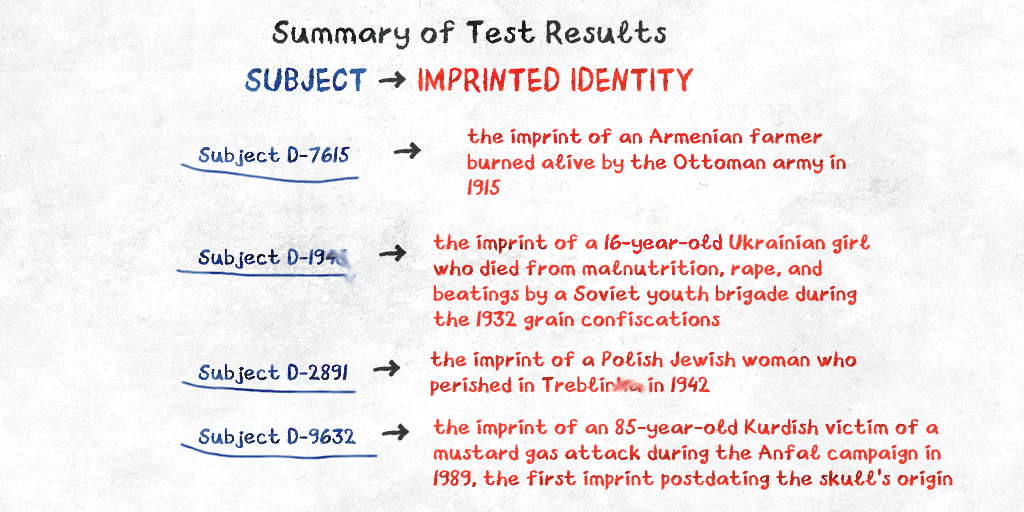
<style>
.page{position:relative;width:1024px;height:512px}
.page>*{position:absolute;margin:0}
.t1{font:32px/48px "CrayonLibre-Regular";letter-spacing:0.005em;font-weight:bold}
.t2{font:32px/48px "CrayonLibre-Regular";letter-spacing:0.005em;text-transform:uppercase;font-weight:bold}
.t3{font:21.3px "CrayonLibre-Regular";letter-spacing:0.005em;color:#ef2f26;font-weight:bold}
.t4{font:21.3px "CrayonLibre-Regular";letter-spacing:0.005em;font-weight:bold}
.t5{font:32px "CrayonLibre-Regular";letter-spacing:0.005em;text-transform:uppercase;font-weight:bold}
.t6{font:21.3px "CrayonLibre-Regular";letter-spacing:0.005em;color:#f23828;font-weight:bold}
</style>
<div class="page">
<p class="t1" style="left:245px;top:20px;width:448px;height:73px;text-align:center">Summary of Test Results<span class="t2"><br>Subject </span><span class="t2">→ </span><span class="t2">Imprinted Identity</span></p>
<p class="t3" style="left:467px;top:128px;width:379px;height:67px">the imprint of an Armenian farmer burned alive by the Ottoman army in 1915</p>
<p class="t4" style="left:198px;top:141px;width:224px;height:307px">Subject D-7615       <span class="t5">→<br>  <br><br> </span>Subject D-1945     <span class="t5">→  <br><br><br><br> </span>Subject D-2891    <span class="t5">→  <br><br> </span>Subject D-9632    <span class="t5">→</span></p>
<p class="t6" style="left:433px;top:233px;width:438px;height:98px">the imprint of a 16-year-old Ukrainian girl who died from malnutrition, rape, and beatings by a Soviet youth brigade during the 1932 grain confiscations</p>
<p class="t4" style="left:430px;top:350px;width:427px;height:47px">the imprint of a Polish Jewish woman who perished in Treblinka in 1942</p>
<p class="t4" style="left:433px;top:418px;width:520px;height:72px">the imprint of an 85-year-old Kurdish victim of a mustard gas attack during the Anfal campaign in 1989, the first imprint postdating the skull's origin</p>
</div>
